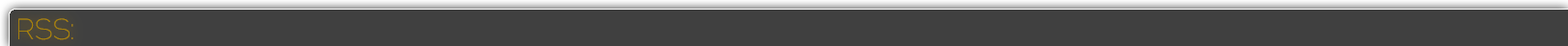
<style>
.page{position:relative;width:1568px;height:46px;background:#404040}
.page>*{position:absolute;margin:0}
.t1{font:29px "Raleway-Thin";color:#b38600}
</style>
<div class="page">
<p class="t1" style="left:18px;top:18px;width:55px;height:23px">RSS:</p>
</div>
